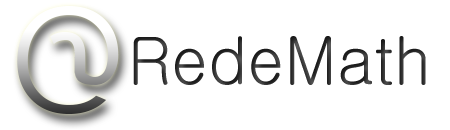
<style>
.page{position:relative;width:450px;height:130px;background:#ffffff}
.page>*{position:absolute;margin:0}
.t1{font:65px "Gulim";color:#2f2f2f}
</style>
<div class="page">
<p class="t1" style="left:133px;top:36px;width:293px;height:49px">RedeMath</p>
</div>
